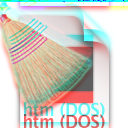
<style>
.page{position:relative;width:128px;height:128px}
.page>*{position:absolute;margin:0}
.t1{font:18px "LucidaGrande-Bold";letter-spacing:-0.02em;scale:0.9 1}
</style>
<div class="page">
<p class="t1" style="left:24px;top:100px;width:81px;height:17px">htm (DOS)</p>
</div>
